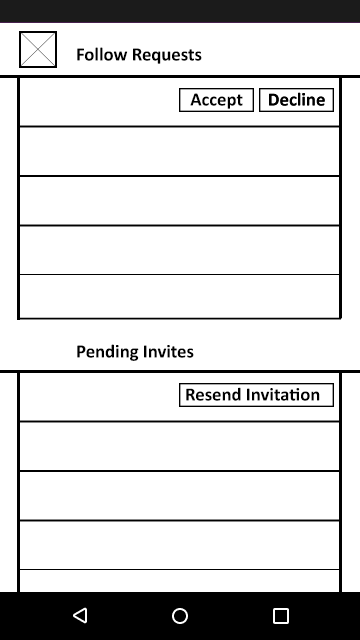
<style>
.page{position:relative;width:360px;height:640px;background:#ffffff}
.page>*{position:absolute;margin:0}
.t1{font:18.9px "Calibri-Bold";color:#000000}
.t2{font:18.8px "Calibri-Bold";color:#000000}
.t3{font:18.7px "Calibri-Bold";color:#000000}
</style>
<div class="page">
<p class="t1" style="left:77px;top:47px;width:125px;height:17px">Follow Requests</p>
<p class="t2" style="left:190px;top:93px;width:53px;height:16px">Accept</p>
<p class="t3" style="left:269px;top:92px;width:56px;height:14px">Decline</p>
<p class="t3" style="left:269px;top:92px;width:56px;height:14px">Decline</p>
<p class="t1" style="left:77px;top:344px;width:117px;height:17px">Pending Invites</p>
<p class="t2" style="left:186px;top:387px;width:134px;height:14px">Resend Invitation</p>
</div>
